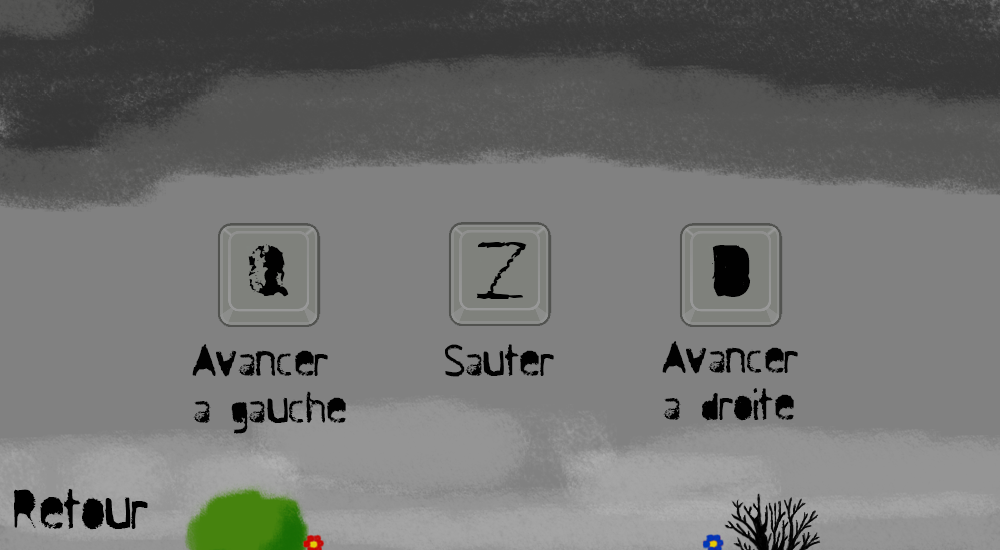
<style>
.page{position:relative;width:1000px;height:550px;background:#818181}
.page>*{position:absolute;margin:0}
.t1{font:69.2px "Antisocial";color:#010101;scale:1.26 1}
.t2{font:73.5px "Antisocial";color:#010101;scale:1.43 1}
.t3{font:64.6px "Antisocial";color:#010101;scale:1.14 1}
.t4{font:39.5px "Antisocial";color:#010101;scale:1.04 1}
.t5{font:50px "Antisocial";color:#000000}
</style>
<div class="page">
<p class="t1" style="left:248px;top:244px;width:41px;height:53px">Q</p>
<p class="t2" style="left:476px;top:242px;width:51px;height:57px">Z</p>
<p class="t3" style="left:712px;top:245px;width:39px;height:52px">D</p>
<p class="t4" style="left:662px;top:341px;width:136px;height:81px">Avancer<br>a droite</p>
<p class="t4" style="left:192px;top:344px;width:154px;height:90px">Avancer<br>a gauche</p>
<p class="t4" style="left:445px;top:344px;width:109px;height:33px">Sauter</p>
<p class="t5" style="left:14px;top:488px;width:134px;height:42px">Retour</p>
</div>
